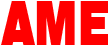
<style>
.page{position:relative;width:108px;height:45px;background:#ff0000}
.page>*{position:absolute;margin:0}
.t1{font:61.1px "Swiss721BT-BlackExtended";color:#ff0000;font-weight:bold;scale:0.56 1}
</style>
<div class="page">
<p class="t1" style="left:1px;top:1px;width:108px;height:45px">AME</p>
</div>
